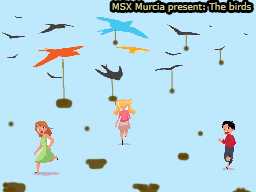
<style>
.page{position:relative;width:256px;height:192px;background:#bee9fc}
.page>*{position:absolute;margin:0}
.t1{font:9px "Verdana";color:#d6cf90}
</style>
<div class="page">
<p class="t1" style="left:112px;top:2px;width:139px;height:10px">MSX Murcia present: The birds</p>
</div>
